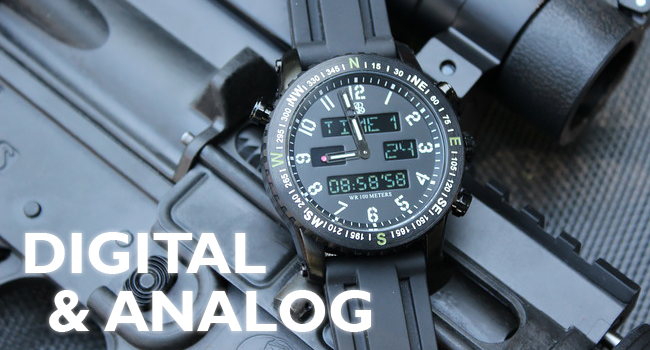
<style>
.page{position:relative;width:650px;height:350px}
.page>*{position:absolute;margin:0}
.t1{font:58.6px "GillSansMT-Bold";color:#ffffff}
</style>
<div class="page">
<p class="t1" style="left:25px;top:232px;width:241px;height:42px">DIGITAL</p>
<p class="t1" style="left:49px;top:290px;width:41px;height:42px">&amp;</p>
<p class="t1" style="left:104px;top:290px;width:267px;height:42px">ANALOG</p>
</div>
